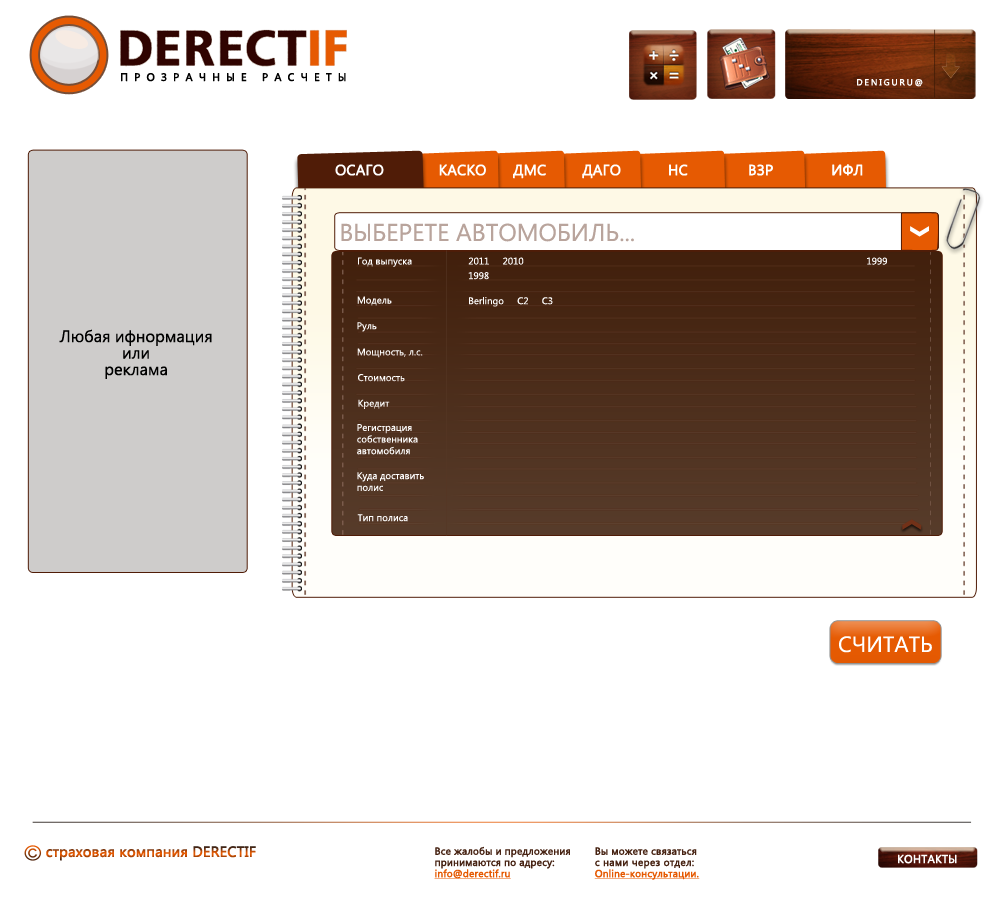
<style>
.page{position:relative;width:1000px;height:906px;background:#ffffff}
.page>*{position:absolute;margin:0}
.t1{font:10.8px "SegoeUI";letter-spacing:0.56em;color:#000000;font-weight:bold}
.t2{font:8.7px "SegoeUI";letter-spacing:0.2em;color:#ffffff;font-weight:bold}
.t3{font:14.6px "SegoeUI";letter-spacing:-0.005em;color:#ffffff;font-weight:bold}
.t4{font:24.3px "SegoeUI";color:#b9a49c}
.t5{font:9.7px "SegoeUI";color:#ffffff}
.t6{font:9.7px/14.6px "SegoeUI";color:#ffffff}
.t7{font:16.5px/16.5px "SegoeUI";color:#000000}
.t8{font:22px "SegoeUI";color:#ffffff}
.t9{font:14.6px "SegoeUI";letter-spacing:-0.005em;font-weight:bold}
.t10{font:10.1px/11.2px "SegoeUI";letter-spacing:-0.005em;color:#472313;font-weight:bold}
.t11{font:10.1px/11.2px "SegoeUI";letter-spacing:-0.005em;color:#e65a02;font-weight:bold;text-decoration:underline}
.t12{font:10.1px/11.2px "SegoeUI";letter-spacing:0.01em;color:#472313;font-weight:bold}
.t13{font:11.3px "SegoeUI";color:#ffffff;font-weight:bold}
</style>
<div class="page">
<p class="t1" style="left:121px;top:73px;width:225px;height:9px">ПРОЗРАЧНЫЕ РАСЧЕТЫ</p>
<p class="t2" style="left:857px;top:79px;width:66px;height:8px">DENIGURU@</p>
<p class="t3" style="left:335px;top:164px;width:49px;height:12px">ОСАГО</p>
<p class="t3" style="left:439px;top:164px;width:47px;height:12px">КАСКО</p>
<p class="t3" style="left:513px;top:164px;width:33px;height:15px">ДМС</p>
<p class="t3" style="left:582px;top:164px;width:39px;height:15px">ДАГО</p>
<p class="t3" style="left:669px;top:164px;width:19px;height:12px">НС</p>
<p class="t3" style="left:749px;top:164px;width:24px;height:12px">ВЗР</p>
<p class="t3" style="left:832px;top:164px;width:31px;height:12px">ИФЛ</p>
<p class="t4" style="left:341px;top:223px;width:293px;height:19px">ВЫБЕРЕТЕ АВТОМОБИЛЬ...</p>
<p class="t5" style="left:358px;top:257px;width:54px;height:10px">Год выпуска</p>
<p class="t6" style="left:468px;top:257px;width:56px;height:23px;text-align:center">2011     2010<br>1998</p>
<p class="t5" style="left:867px;top:257px;width:20px;height:8px">1999</p>
<p class="t5" style="left:357px;top:296px;width:35px;height:10px">Модель</p>
<p class="t5" style="left:469px;top:297px;width:84px;height:10px">Berlingo     C2     C3</p>
<p class="t7" style="left:59px;top:329px;width:153px;height:50px;text-align:center">Любая ифнормация<br>или<br>реклама</p>
<p class="t5" style="left:357px;top:322px;width:20px;height:10px">Руль</p>
<p class="t5" style="left:357px;top:348px;width:66px;height:10px">Мощность, л.с.</p>
<p class="t5" style="left:358px;top:374px;width:47px;height:8px">Стоимость</p>
<p class="t5" style="left:358px;top:399px;width:32px;height:10px">Кредит</p>
<p class="t5" style="left:357px;top:424px;width:61px;height:31px">Регистрация<br>собственника<br>автомобиля</p>
<p class="t5" style="left:357px;top:472px;width:67px;height:19px">Куда доставить<br>полис</p>
<p class="t5" style="left:357px;top:514px;width:51px;height:8px">Тип полиса</p>
<p class="t8" style="left:839px;top:636px;width:93px;height:17px">СЧИТАТЬ</p>
<p class="t9" style="left:46px;top:846px;width:210px;height:15px">страховая компания DERECTIF</p>
<p class="t10" style="left:434px;top:846px;width:136px;height:33px">Все жалобы и предложения<br>принимаются по адресу:<br><span class="t11">info@derectif.ru</span></p>
<p class="t11" style="left:594px;top:847px;width:106px;height:33px"><span class="t10">Вы можете связаться<br></span><span class="t12">с нами через отдел:<br></span>Online-консультации.</p>
<p class="t13" style="left:898px;top:854px;width:59px;height:10px">КОНТАКТЫ</p>
</div>
